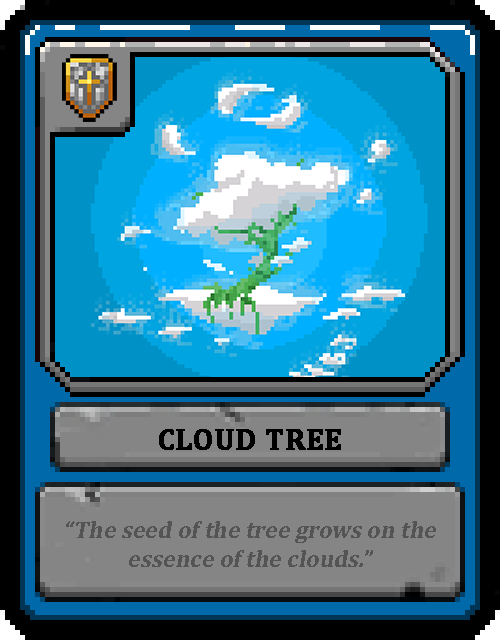
<style>
.page{position:relative;width:500px;height:640px}
.page>*{position:absolute;margin:0}
.t1{font:30px "Cambria-Bold";color:#000000;text-transform:uppercase;font-weight:bold}
.t2{font:24px "Cambria-Bold";color:#545454;font-style:italic}
</style>
<div class="page">
<p class="t1" style="left:159px;top:429px;width:182px;height:21px">Cloud Tree</p>
<p class="t2" style="left:66px;top:521px;width:370px;height:46px;text-align:center">“The seed of the tree grows on the essence of the clouds.”</p>
</div>
